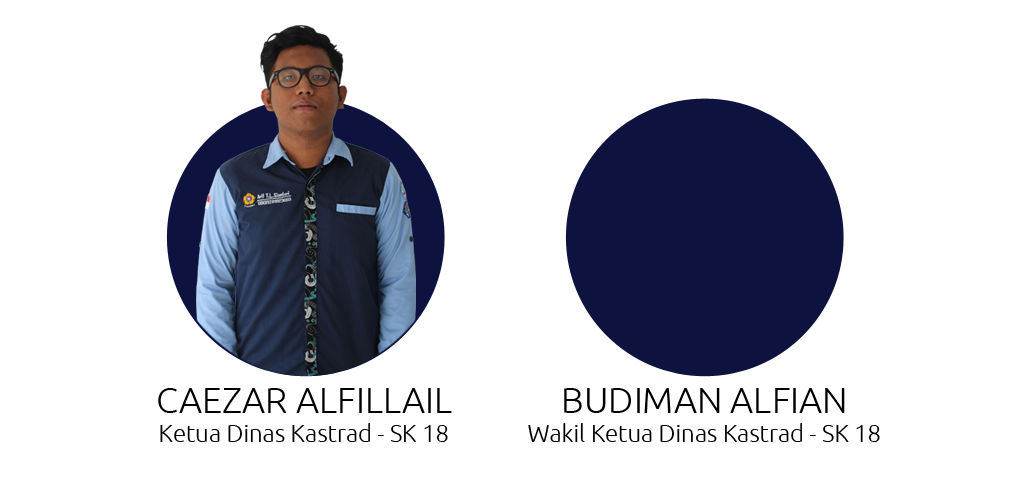
<style>
.page{position:relative;width:1024px;height:500px;background:#ffffff}
.page>*{position:absolute;margin:0}
.t1{font:24px "Ubuntu-Light";color:#000000}
.t2{font:36px "Ubuntu-Light";color:#000000}
</style>
<div class="page">
<p class="t1" style="left:158px;top:388px;width:294px;height:54px;text-align:center"><span class="t2">CAEZAR ALFILLAIL<br></span>Ketua Dinas Kastrad - SK 18</p>
<p class="t1" style="left:528px;top:388px;width:352px;height:54px;text-align:center"><span class="t2">BUDIMAN ALFIAN<br></span>Wakil Ketua Dinas Kastrad - SK 18</p>
</div>
